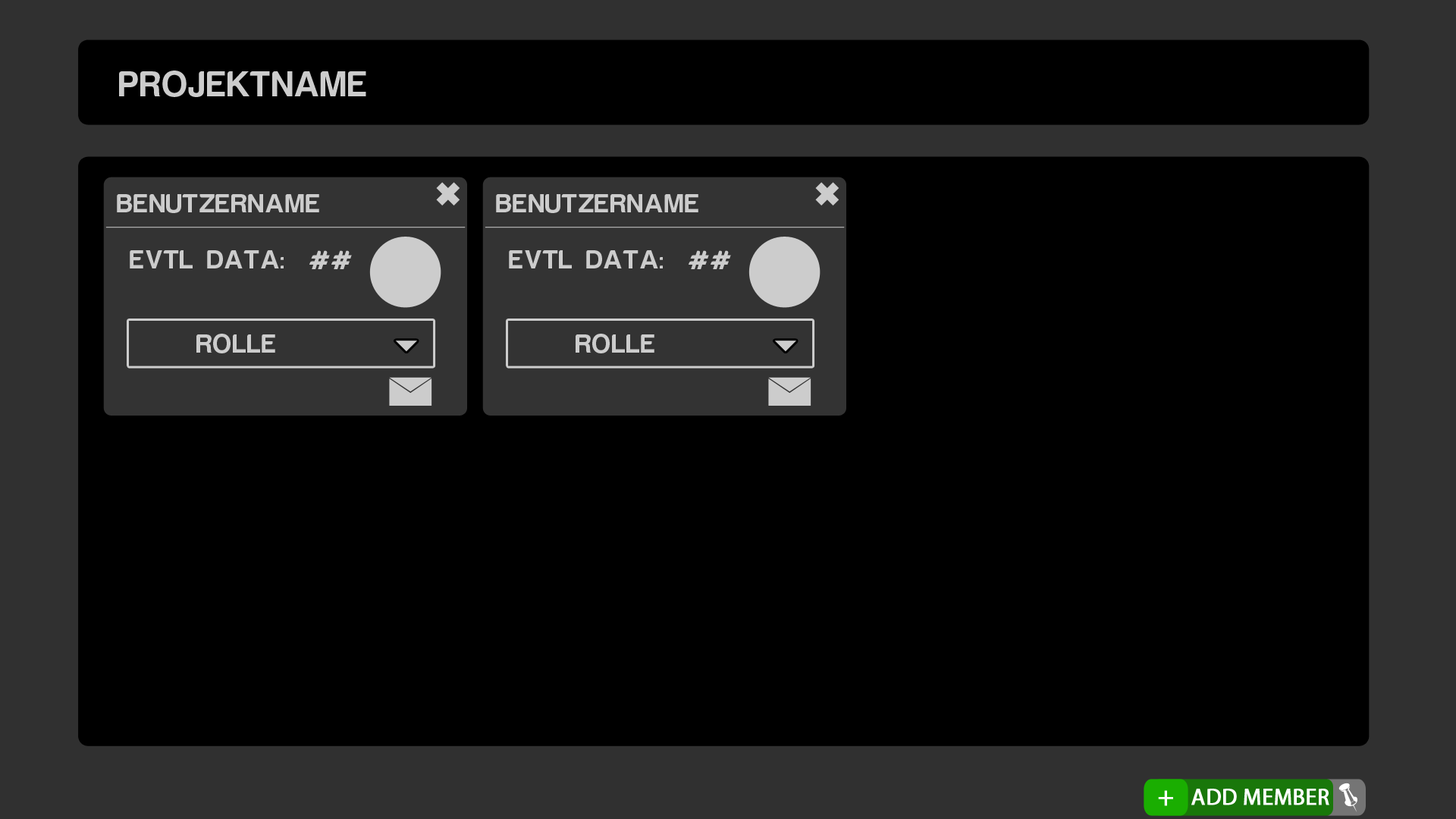
<style>
.page{position:relative;width:1456px;height:819px;background:#000000}
.page>*{position:absolute;margin:0}
.t1{font:36.4px "HarabaraMaisBold-HarabaraMaisBold";color:#cccccc;text-transform:uppercase}
.t2{font:27.3px "HarabaraMaisBold-HarabaraMaisBold";color:#cccccc;text-transform:uppercase}
.t3{font:27.3px "MyriadPro-Regular";color:#ffffff;text-transform:uppercase;font-weight:bold}
.t4{font:22.7px "MyriadPro-Regular";color:#ffffff;text-transform:uppercase;font-weight:bold}
</style>
<div class="page">
<p class="t1" style="left:119px;top:71px;width:247px;height:26px">ProjektName</p>
<p class="t2" style="left:117px;top:194px;width:202px;height:19px">Benutzername</p>
<p class="t2" style="left:496px;top:194px;width:202px;height:19px">Benutzername</p>
<p class="t2" style="left:130px;top:250px;width:154px;height:18px">evtl Data:</p>
<p class="t2" style="left:309px;top:250px;width:43px;height:19px">##</p>
<p class="t2" style="left:509px;top:250px;width:154px;height:18px">evtl Data:</p>
<p class="t2" style="left:689px;top:250px;width:42px;height:19px">##</p>
<p class="t2" style="left:196px;top:334px;width:79px;height:19px">Rolle</p>
<p class="t2" style="left:576px;top:334px;width:78px;height:19px">Rolle</p>
<p class="t3" style="left:1158px;top:790px;width:15px;height:16px">+</p>
<p class="t4" style="left:1191px;top:789px;width:138px;height:16px">add member</p>
</div>
